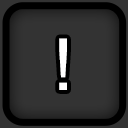
<style>
.page{position:relative;width:128px;height:128px;background:#333333}
.page>*{position:absolute;margin:0}
.t1{font:72px "ArialMT";color:#fffefe}
</style>
<div class="page">
<p class="t1" style="left:59px;top:38px;width:8px;height:52px">!</p>
</div>
